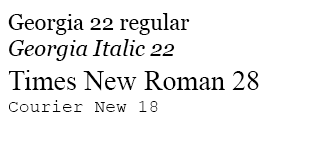
<style>
.page{position:relative;width:320px;height:160px;background:#ffffff}
.page>*{position:absolute;margin:0}
.t1{font:22px "Georgia";color:#000000}
.t2{font:22px "Georgia-Italic";color:#000000}
.t3{font:28px "TimesNewRomanPSMT";color:#000000}
.t4{font:18px "CourierNewPSMT";color:#000000}
</style>
<div class="page">
<p class="t1" style="left:8px;top:13px;width:251px;height:99px">Georgia 22 regular<br><span class="t2">Georgia Italic 22<br></span><span class="t3">Times New Roman 28<br></span><span class="t4">Courier New 18</span></p>
</div>
